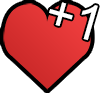
<style>
.page{position:relative;width:100px;height:93px;background:#ffffff}
.page>*{position:absolute;margin:0}
.t1{font:11.9px "ArialMT";color:#ffffff}
</style>
<div class="page">
<p class="t1" style="left:49px;top:2px;width:49px;height:39px;rotate:16deg">+1</p>
</div>
